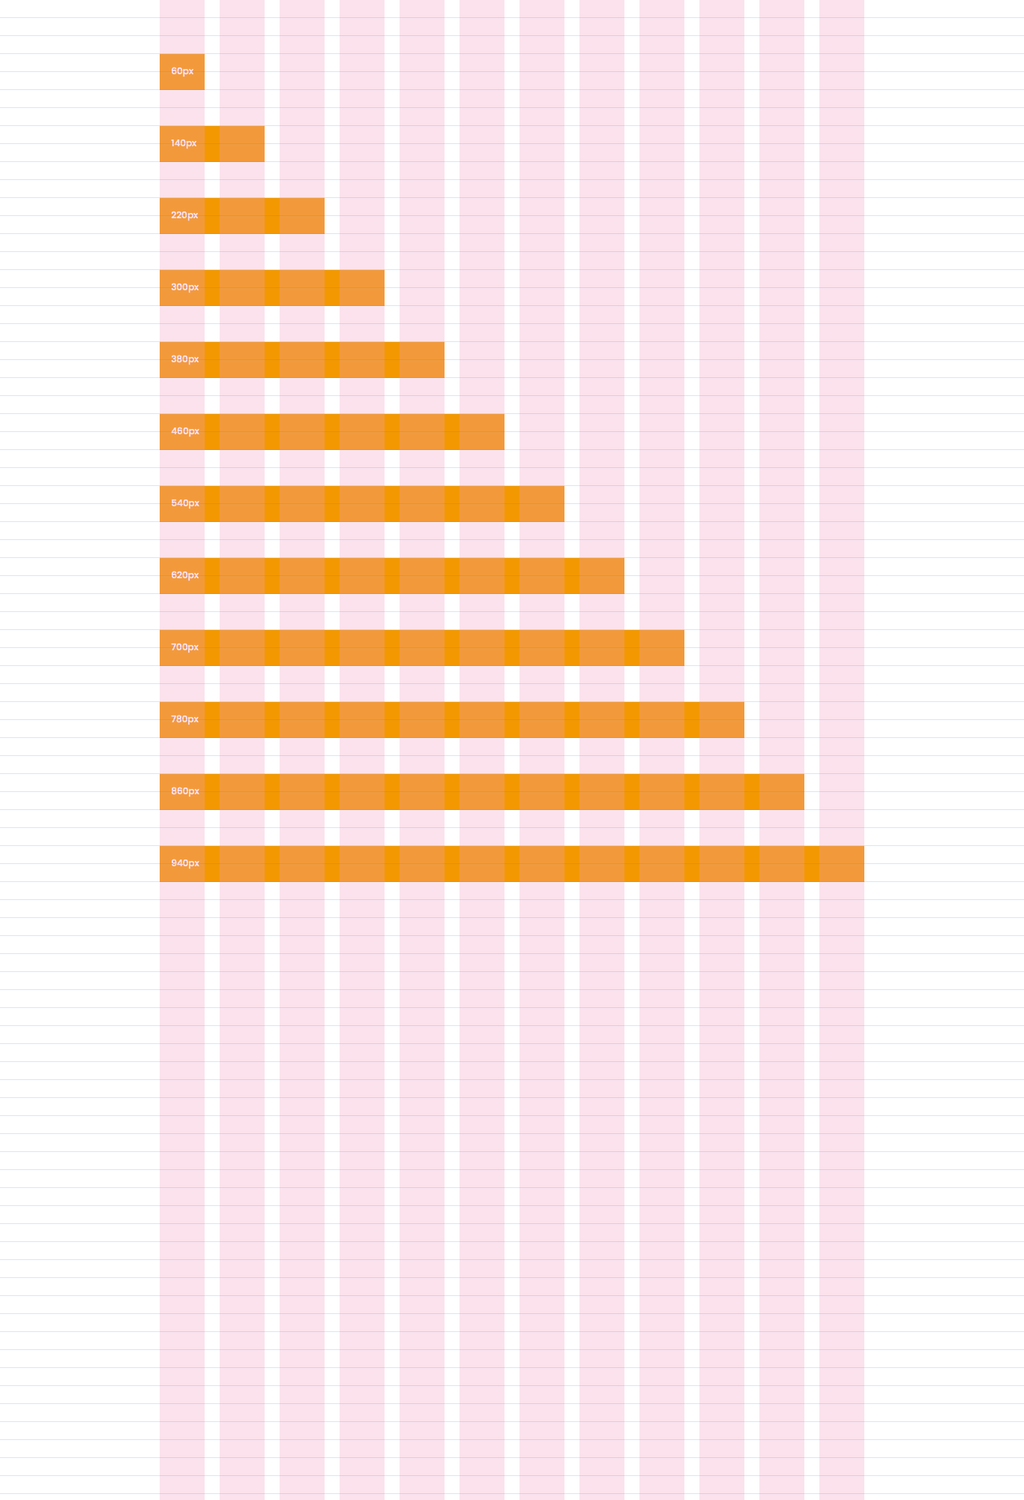
<style>
.page{position:relative;width:1024px;height:1500px;background:#ffffff}
.page>*{position:absolute;margin:0}
.t1{font:9px "Poppins-Medium";color:#fbe2ed}
</style>
<div class="page">
<p class="t1" style="left:172px;top:67px;width:22px;height:10px">60px</p>
<p class="t1" style="left:171px;top:139px;width:25px;height:10px">140px</p>
<p class="t1" style="left:171px;top:211px;width:27px;height:10px">220px</p>
<p class="t1" style="left:171px;top:283px;width:28px;height:10px">300px</p>
<p class="t1" style="left:171px;top:355px;width:28px;height:10px">380px</p>
<p class="t1" style="left:171px;top:427px;width:29px;height:10px">460px</p>
<p class="t1" style="left:172px;top:499px;width:28px;height:10px">540px</p>
<p class="t1" style="left:172px;top:571px;width:27px;height:10px">620px</p>
<p class="t1" style="left:171px;top:643px;width:28px;height:10px">700px</p>
<p class="t1" style="left:171px;top:715px;width:28px;height:10px">780px</p>
<p class="t1" style="left:171px;top:787px;width:29px;height:10px">860px</p>
<p class="t1" style="left:172px;top:859px;width:28px;height:10px">940px</p>
</div>
